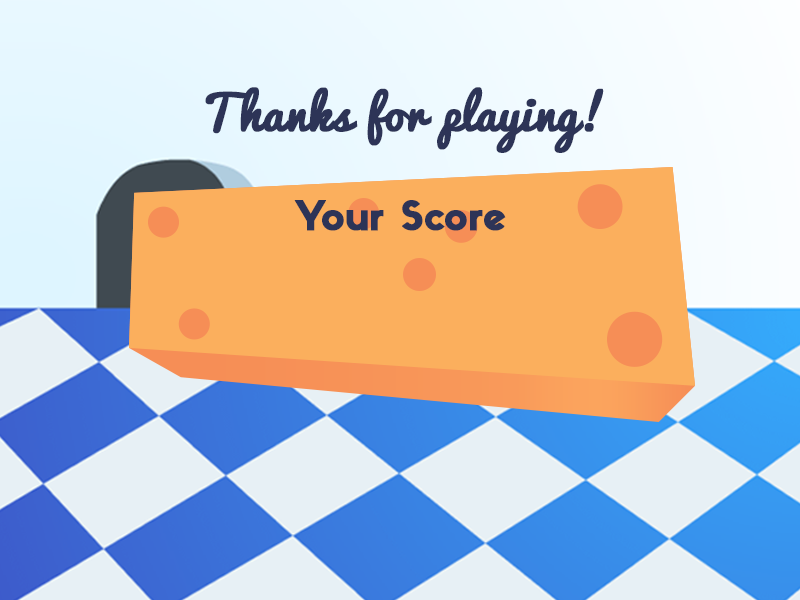
<style>
.page{position:relative;width:800px;height:600px}
.page>*{position:absolute;margin:0}
.t1{font:46.8px "Pacifico-Regular";color:#2d3457;font-weight:bold}
.t2{font:39px "Sifonn-Pro";color:#2d3457;font-weight:bold}
</style>
<div class="page">
<p class="t1" style="left:205px;top:87px;width:399px;height:66px">Thanks for playing!</p>
<p class="t2" style="left:294px;top:200px;width:212px;height:31px">Your Score</p>
</div>
